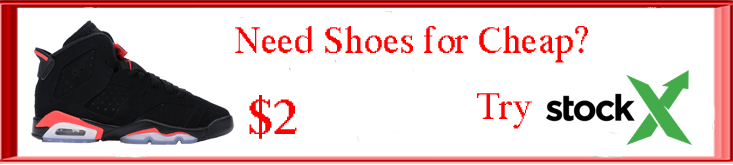
<style>
.page{position:relative;width:733px;height:165px;background:#ffffff}
.page>*{position:absolute;margin:0}
.t1{font:37.5px "MS Serif";color:#ff0000}
.t2{font:12px "MS Serif";color:#ff0000}
</style>
<div class="page">
<p class="t1" style="left:235px;top:26px;width:353px;height:37px">Need Shoes for Cheap?</p>
<p class="t2" style="left:249px;top:95px;width:48px;height:44px">$2</p>
<p class="t1" style="left:477px;top:93px;width:55px;height:36px">Try</p>
</div>
